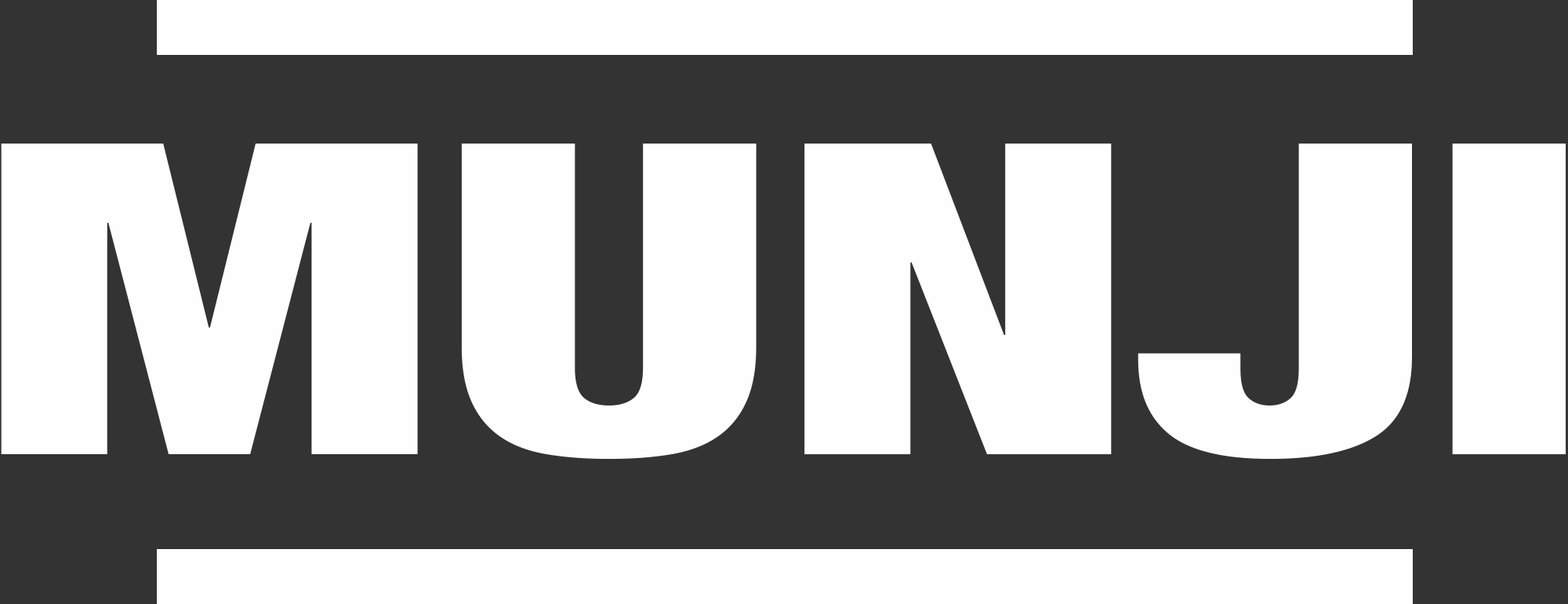
<style>
.page{position:relative;width:1568px;height:604px;background:#333333}
.page>*{position:absolute;margin:0}
.t1{font:434.5px "HelveticaNeue-CondensedBlack";color:#fefefe;scale:1.4 1}
</style>
<div class="page">
<p class="t1" style="left:1px;top:143px;width:1565px;height:316px">MUNJI</p>
</div>
